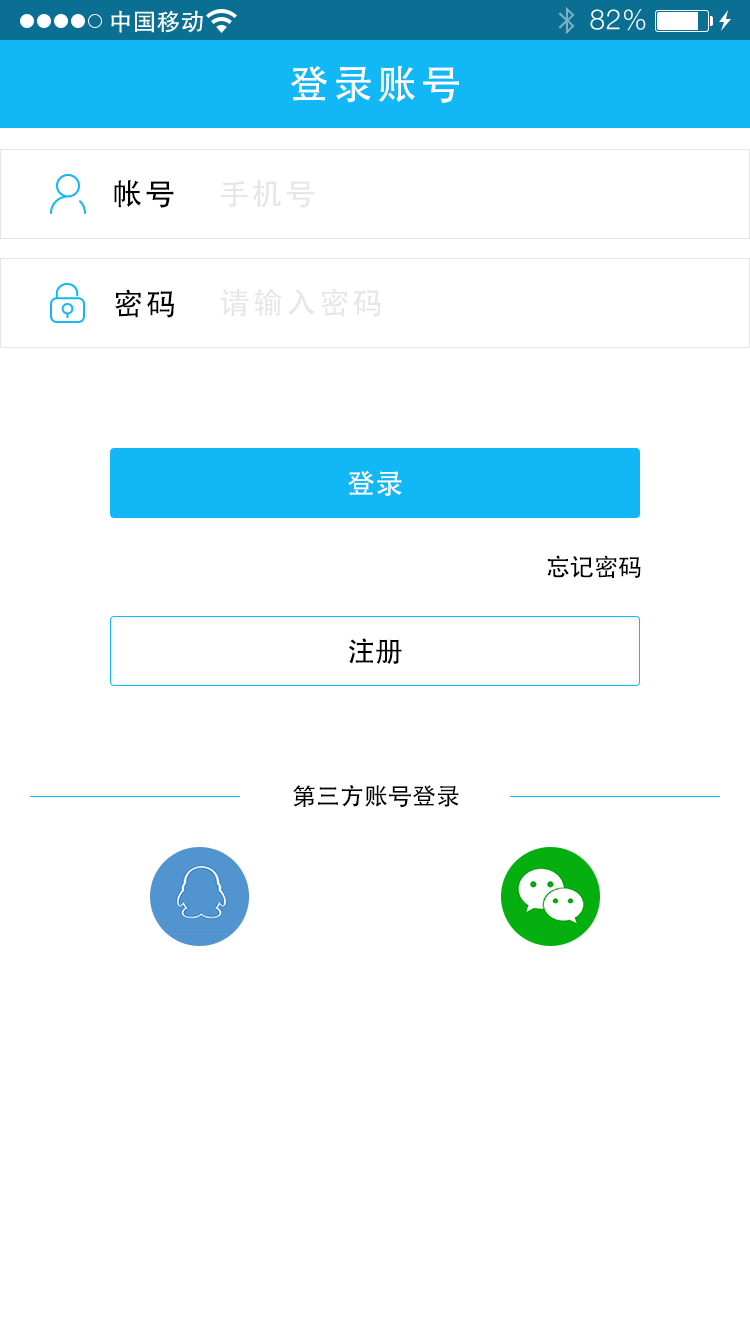
<style>
.page{position:relative;width:750px;height:1334px;background:#ffffff}
.page>*{position:absolute;margin:0}
.t1{font:40px "AdobeHeitiStd-Regular";letter-spacing:0.104em;color:#ffffff}
.t2{font:30px "AdobeHeitiStd-Regular";letter-spacing:0.104em;color:#000000}
.t3{font:30px "AdobeHeitiStd-Regular";letter-spacing:0.104em;color:#e6e6e6}
.t4{font:30px "AdobeHeitiStd-Regular";letter-spacing:0.104em;color:#010101}
.t5{font:28px "AdobeHeitiStd-Regular";color:#ffffff}
.t6{font:24px "AdobeHeitiStd-Regular";color:#000000}
.t7{font:28px "AdobeHeitiStd-Regular";color:#000000}
</style>
<div class="page">
<p class="t1" style="left:290px;top:65px;width:169px;height:38px">登录账号</p>
<p class="t2" style="left:114px;top:180px;width:60px;height:28px">帐号</p>
<p class="t3" style="left:220px;top:180px;width:94px;height:28px">手机号</p>
<p class="t4" style="left:114px;top:289px;width:60px;height:29px">密码</p>
<p class="t3" style="left:221px;top:288px;width:160px;height:29px">请输入密码</p>
<p class="t5" style="left:348px;top:470px;width:54px;height:26px">登录</p>
<p class="t6" style="left:547px;top:555px;width:94px;height:23px">忘记密码</p>
<p class="t7" style="left:349px;top:638px;width:53px;height:26px">注册</p>
<p class="t6" style="left:293px;top:785px;width:166px;height:23px">第三方账号登录</p>
</div>
